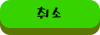
<style>
.page{position:relative;width:100px;height:35px;background:#37d300}
.page>*{position:absolute;margin:0}
.t1{font:18px "MagicR-HM";color:#000000}
</style>
<div class="page">
<p class="t1" style="left:37px;top:6px;width:24px;height:13px">취소</p>
</div>
